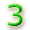
<style>
.page{position:relative;width:30px;height:30px;background:#ffffff}
.page>*{position:absolute;margin:0}
.t1{font:30px "Verdana"}
</style>
<div class="page">
<p class="t1" style="left:7px;top:4px;width:16px;height:22px">3</p>
</div>
